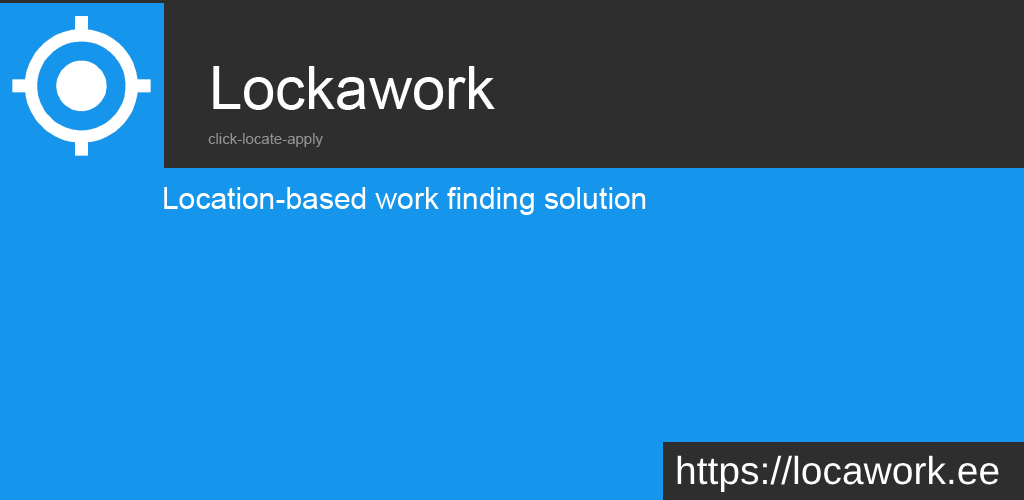
<style>
.page{position:relative;width:1024px;height:500px;background:#1595eb}
.page>*{position:absolute;margin:0}
.t1{font:60px "ArialMT";color:#fefefe}
.t2{font:15px "ArialMT";color:#929292}
.t3{font:30px "ArialMT";color:#ffffff}
.t4{font:39px "ArialMT";color:#fefefe}
</style>
<div class="page">
<p class="t1" style="left:213px;top:66px;width:282px;height:44px">Lockawork</p>
<p class="t2" style="left:208px;top:133px;width:115px;height:14px">click-locate-apply</p>
<p class="t3" style="left:164px;top:187px;width:482px;height:28px">Location-based work finding solution</p>
<p class="t4" style="left:677px;top:455px;width:322px;height:38px">https://locawork.ee</p>
</div>
